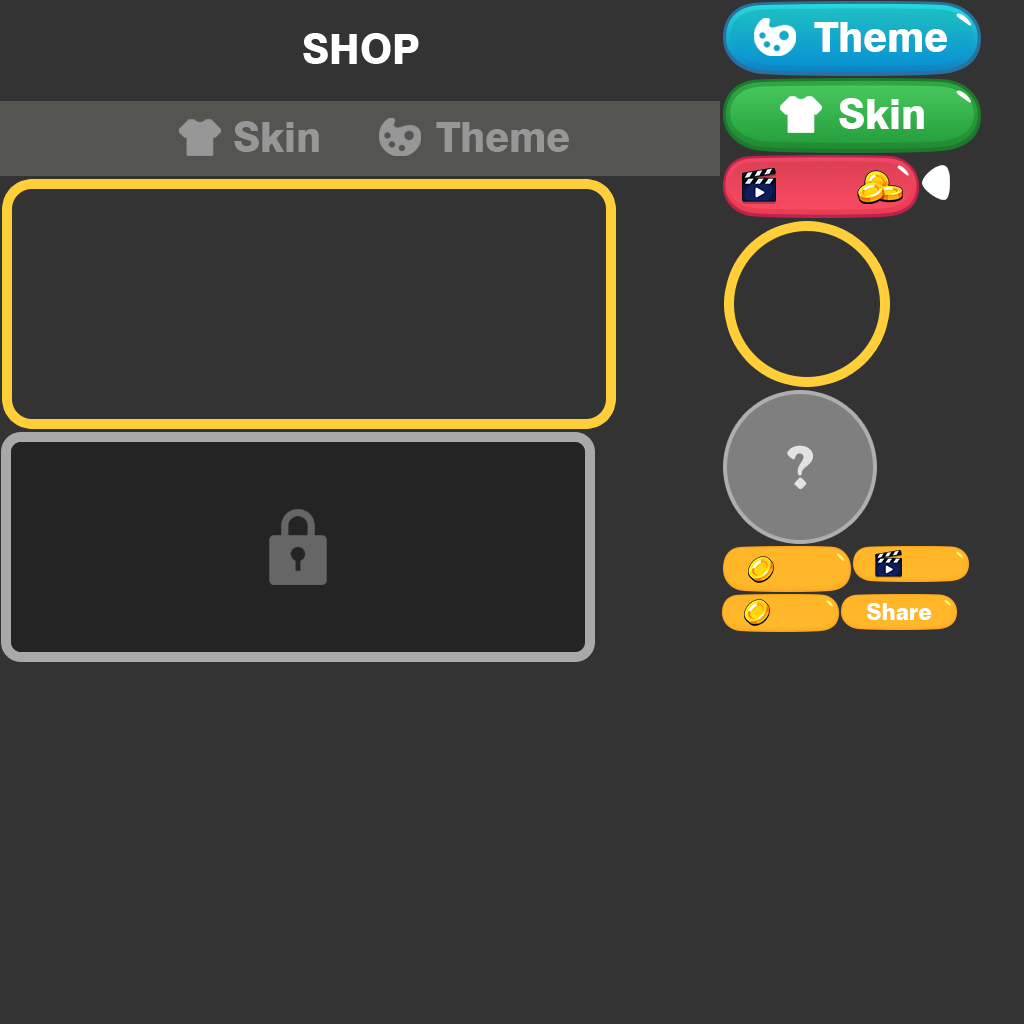
<style>
.page{position:relative;width:1024px;height:1024px;background:#333333}
.page>*{position:absolute;margin:0}
.t1{font:41.2px "Swiss721BT-Heavy";color:#ffffff}
.t2{font:41.2px "Swiss721BT-Heavy";color:#979797}
.t3{font:23.2px "Swiss721BT-Heavy";color:#ffffff}
</style>
<div class="page">
<p class="t1" style="left:814px;top:22px;width:133px;height:30px">Theme</p>
<p class="t1" style="left:303px;top:33px;width:116px;height:31px">SHOP</p>
<p class="t1" style="left:839px;top:98px;width:85px;height:31px">Skin</p>
<p class="t2" style="left:234px;top:121px;width:85px;height:31px">Skin</p>
<p class="t2" style="left:436px;top:122px;width:133px;height:30px">Theme</p>
<p class="t3" style="left:867px;top:603px;width:65px;height:17px">Share</p>
</div>
